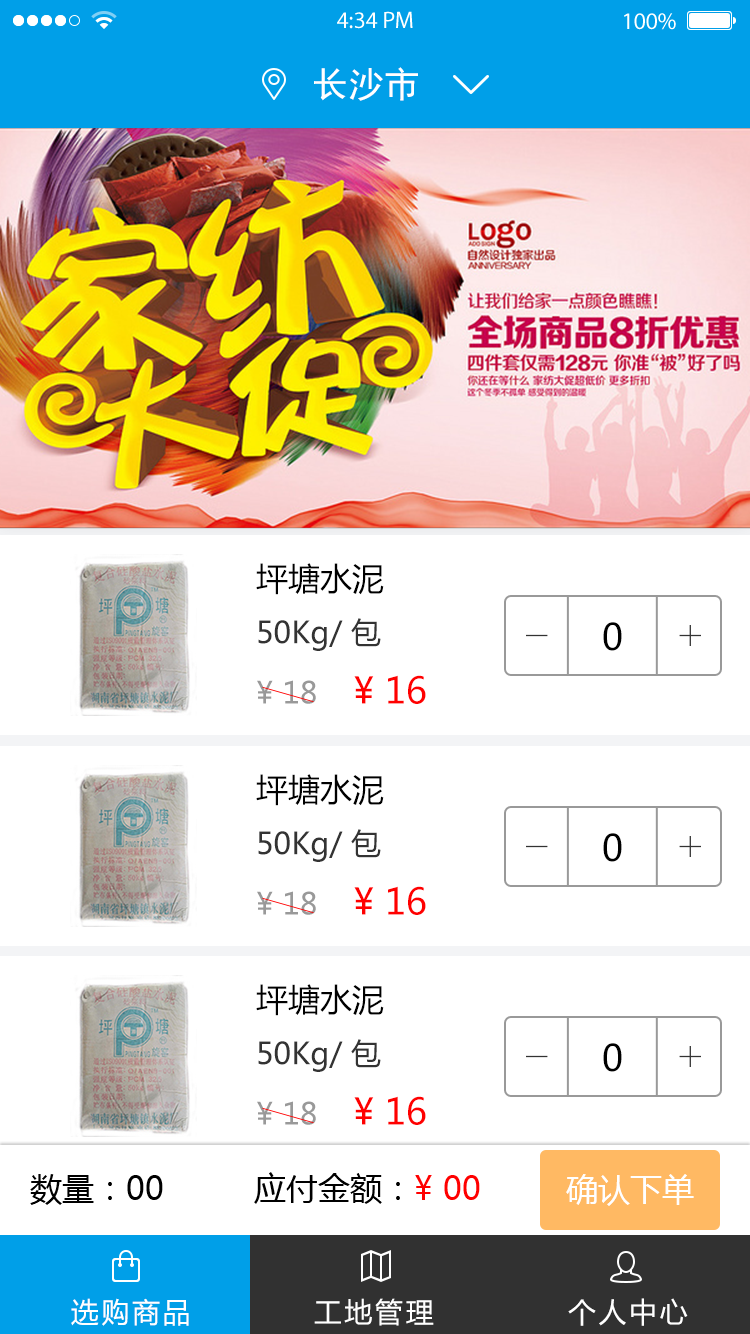
<style>
.page{position:relative;width:750px;height:1334px;background:#ffffff}
.page>*{position:absolute;margin:0}
.t1{font:36px "SimHei";color:#ffffff}
.t2{font:30px/55px "MicrosoftYaHei";color:#333333}
.t3{font:32px/55px "MicrosoftYaHei";color:#000000}
.t4{font:30px/55px "MicrosoftYaHei";color:#999999}
.t5{font:36px/55px "MicrosoftYaHei";color:#ff0000}
.t6{font:36px "MicrosoftYaHei";color:#000000}
.t7{font:32px "MicrosoftYaHei";color:#000000}
.t8{font:32px "MicrosoftYaHei";color:#ff0000}
.t9{font:32px "MicrosoftYaHei";color:#ffffff}
.t10{font:28px "MicrosoftYaHei";letter-spacing:0.1em;color:#ffffff}
</style>
<div class="page">
<p class="t1" style="left:314px;top:67px;width:104px;height:34px">长沙市</p>
<p class="t2" style="left:256px;top:563px;width:170px;height:141px"><span class="t3">坪塘水泥<br></span>50Kg/ 包<br><span class="t4">¥ 18     </span><span class="t5">¥ 16</span></p>
<p class="t6" style="left:603px;top:622px;width:19px;height:29px">0</p>
<p class="t2" style="left:256px;top:774px;width:170px;height:141px"><span class="t3">坪塘水泥<br></span>50Kg/ 包<br><span class="t4">¥ 18     </span><span class="t5">¥ 16</span></p>
<p class="t6" style="left:603px;top:833px;width:19px;height:29px">0</p>
<p class="t2" style="left:256px;top:984px;width:170px;height:141px"><span class="t3">坪塘水泥<br></span>50Kg/ 包<br><span class="t4">¥ 18     </span><span class="t5">¥ 16</span></p>
<p class="t6" style="left:603px;top:1043px;width:19px;height:29px">0</p>
<p class="t7" style="left:30px;top:1172px;width:450px;height:33px">数量：00         应付金额：<span class="t8">¥ 00</span></p>
<p class="t9" style="left:566px;top:1174px;width:128px;height:32px">确认下单</p>
<p class="t10" style="left:71px;top:1298px;width:617px;height:28px">选购商品           工地管理            个人中心</p>
</div>
